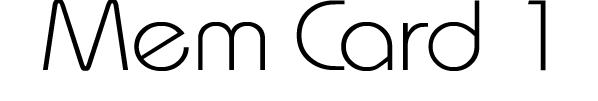
<style>
.page{position:relative;width:598px;height:101px;background:#ffffff}
.page>*{position:absolute;margin:0}
.t1{font:100px "MonaKo";color:#000000;scale:1.1 1}
</style>
<div class="page">
<p class="t1" style="left:43px;top:0px;width:503px;height:71px">Mem Card 1</p>
</div>
